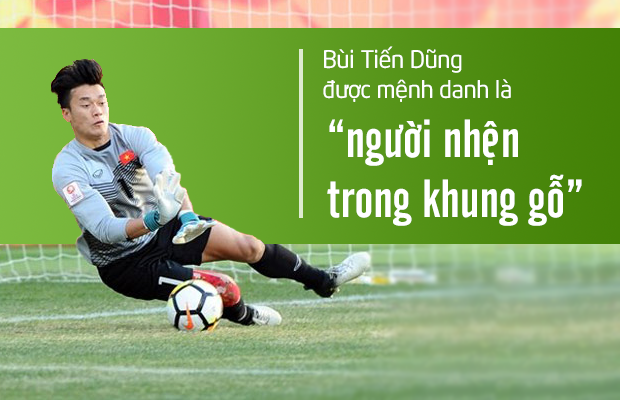
<style>
.page{position:relative;width:620px;height:400px}
.page>*{position:absolute;margin:0}
.t1{font:24px/30px "UTM-Neo-Sans-Intel";color:#ffffff}
.t2{font:53px/60px "UTM-Cafeta";color:#ffffff}
</style>
<div class="page">
<p class="t1" style="left:323px;top:46px;width:188px;height:56px">Bùi Tiến Dũng <br>được mệnh danh là</p>
<p class="t2" style="left:327px;top:119px;width:255px;height:107px">“người nhện <br>trong khung gỗ”</p>
</div>
